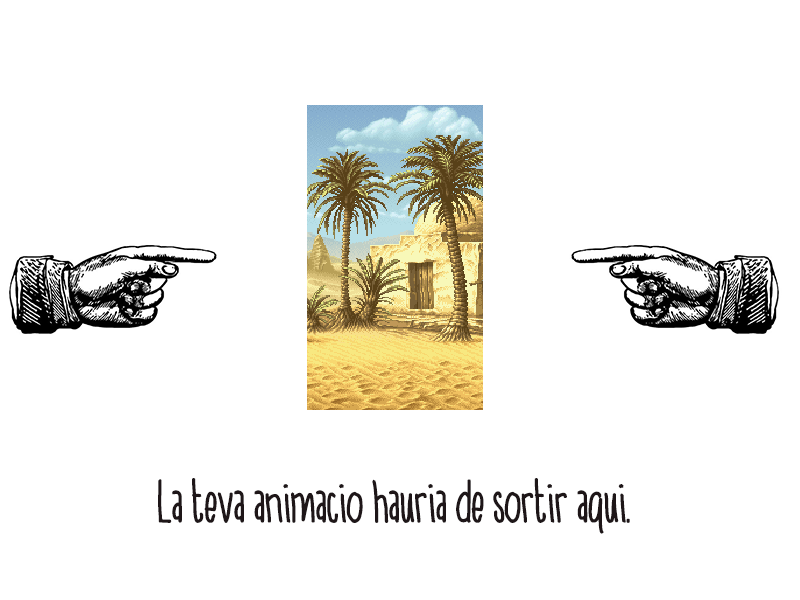
<style>
.page{position:relative;width:800px;height:600px;background:#ffffff}
.page>*{position:absolute;margin:0}
.t1{font:60px "ADayinSeptember";color:#1e1618}
</style>
<div class="page">
<p class="t1" style="left:158px;top:478px;width:472px;height:56px">La teva animacio hauria de sortir aqui.</p>
</div>
